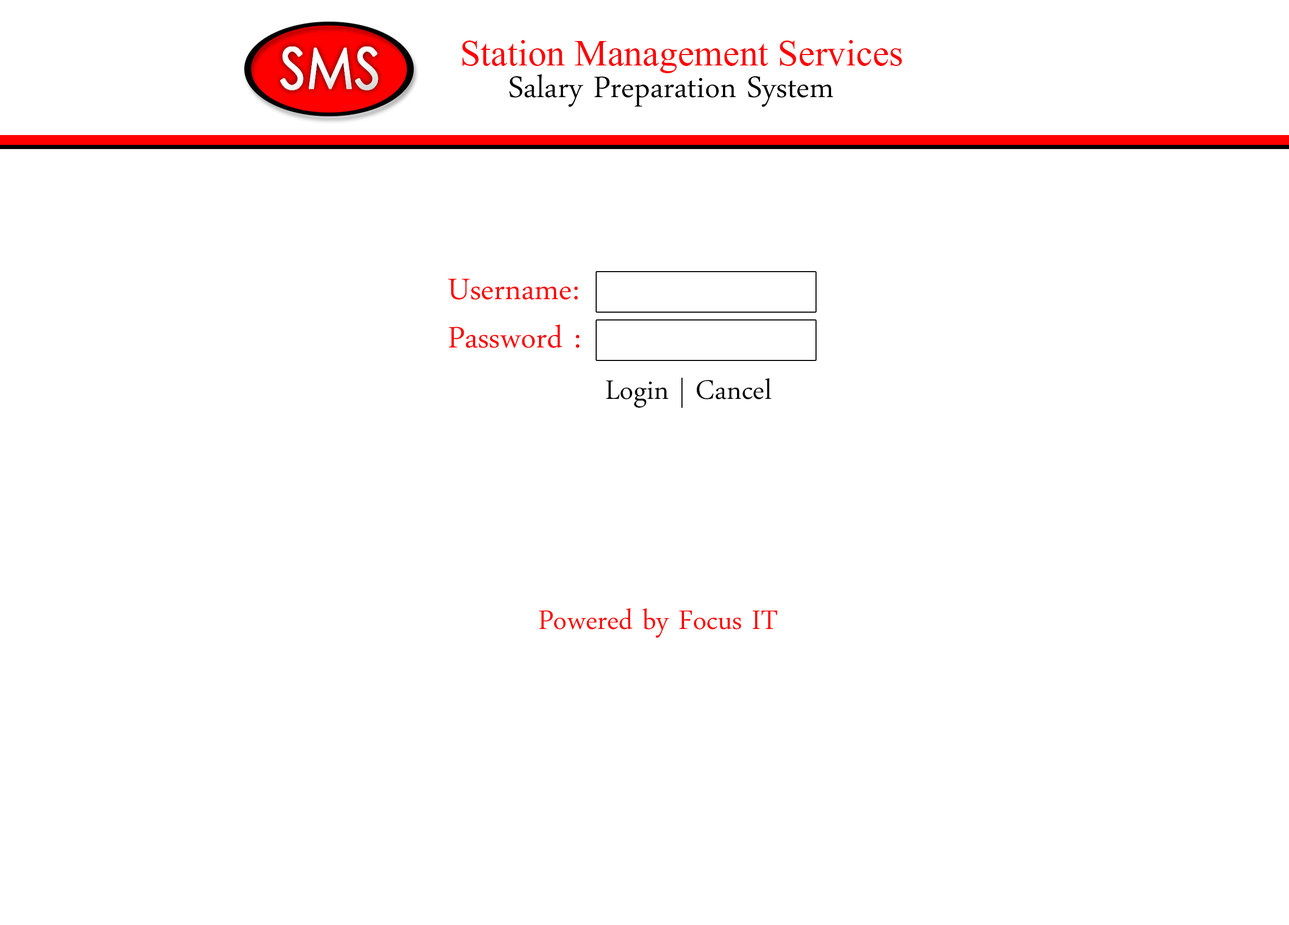
<style>
.page{position:relative;width:1289px;height:925px;background:#ffffff}
.page>*{position:absolute;margin:0}
.t1{font:48px "Kokila";color:#fe0000}
.t2{font:43.6px "DaunPenh";color:#000000}
.t3{font:43.6px "DaunPenh";color:#fe0000}
.t4{font:39.3px "DaunPenh";color:#040404}
.t5{font:39.3px "DaunPenh";color:#fe0000}
</style>
<div class="page">
<p class="t1" style="left:462px;top:40px;width:440px;height:33px">Station Management Services</p>
<p class="t2" style="left:509px;top:74px;width:324px;height:33px">Salary Preparation System</p>
<p class="t3" style="left:448px;top:278px;width:130px;height:22px">Username:</p>
<p class="t3" style="left:448px;top:324px;width:131px;height:24px">Password :</p>
<p class="t4" style="left:606px;top:378px;width:165px;height:30px">Login | Cancel</p>
<p class="t5" style="left:539px;top:608px;width:238px;height:30px">Powered by Focus IT</p>
</div>
